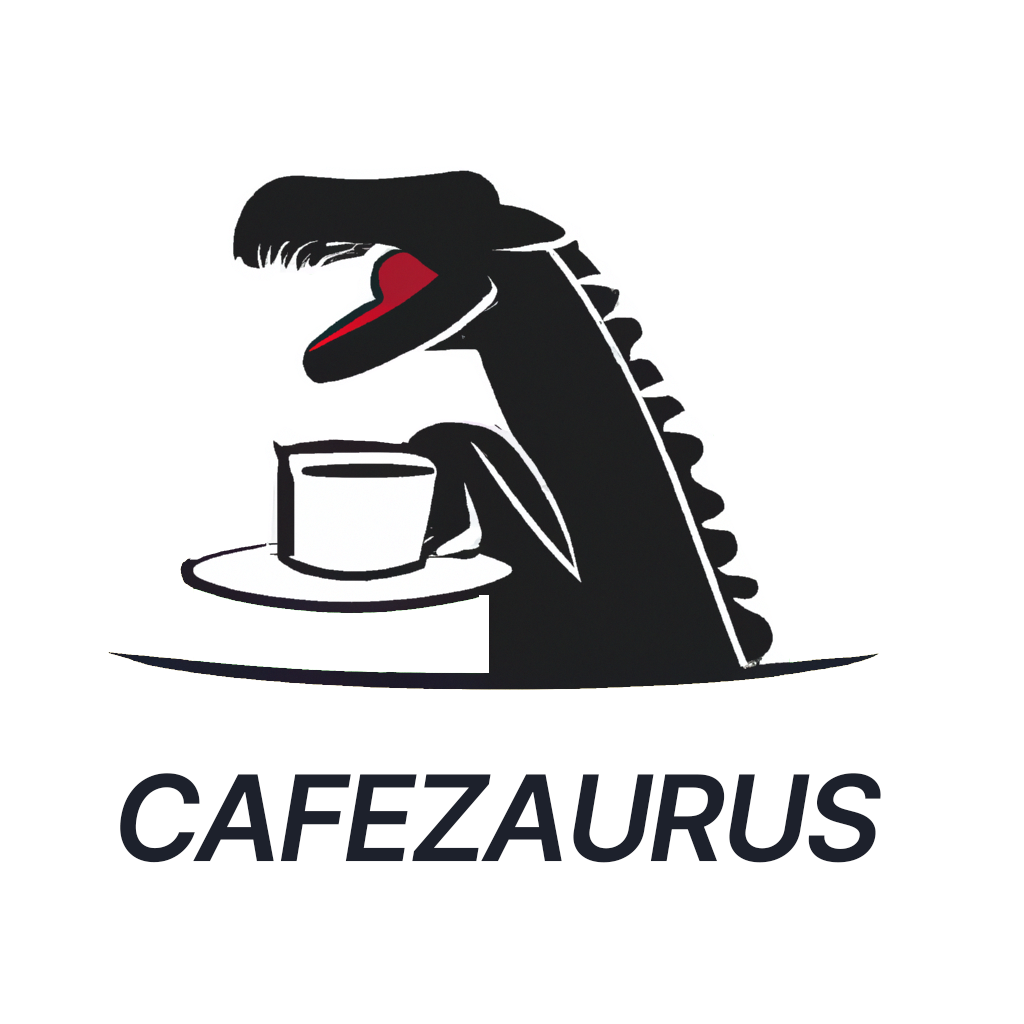
<style>
.page{position:relative;width:1024px;height:1024px;background:#ffffff}
.page>*{position:absolute;margin:0}
.t1{font:119px "InterTightItalic-SemiBoldItalic";color:#1d212c}
</style>
<div class="page">
<p class="t1" style="left:120px;top:773px;width:761px;height:90px">CAFEZAURUS</p>
</div>
